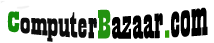
<style>
.page{position:relative;width:214px;height:43px;background:#ffffff}
.page>*{position:absolute;margin:0}
.t1{font:43px "Playbill";color:#0c0c0c}
.t2{font:43px "Playbill";color:#128b09}
.t3{font:43px "Playbill";color:#239211}
.t4{font:43px "Playbill";color:#000000}
.t5{font:43px "Playbill";color:#30a004}
</style>
<div class="page">
<p class="t1" style="left:7px;top:7px;width:201px;height:35px"><span class="t2">C</span>omputer<span class="t3">B</span><span class="t4">azaar</span><span class="t5">.</span><span class="t4">com</span></p>
</div>
